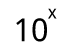
<style>
.page{position:relative;width:70px;height:55px;background:#ffffff}
.page>*{position:absolute;margin:0}
.t1{font:18px "DroidSans";color:#000000}
.t2{font:31.8px "DroidSans";color:#000000}
</style>
<div class="page">
<p class="t1" style="left:48px;top:8px;width:9px;height:11px">x</p>
<p class="t2" style="left:16px;top:18px;width:31px;height:24px">10</p>
</div>
